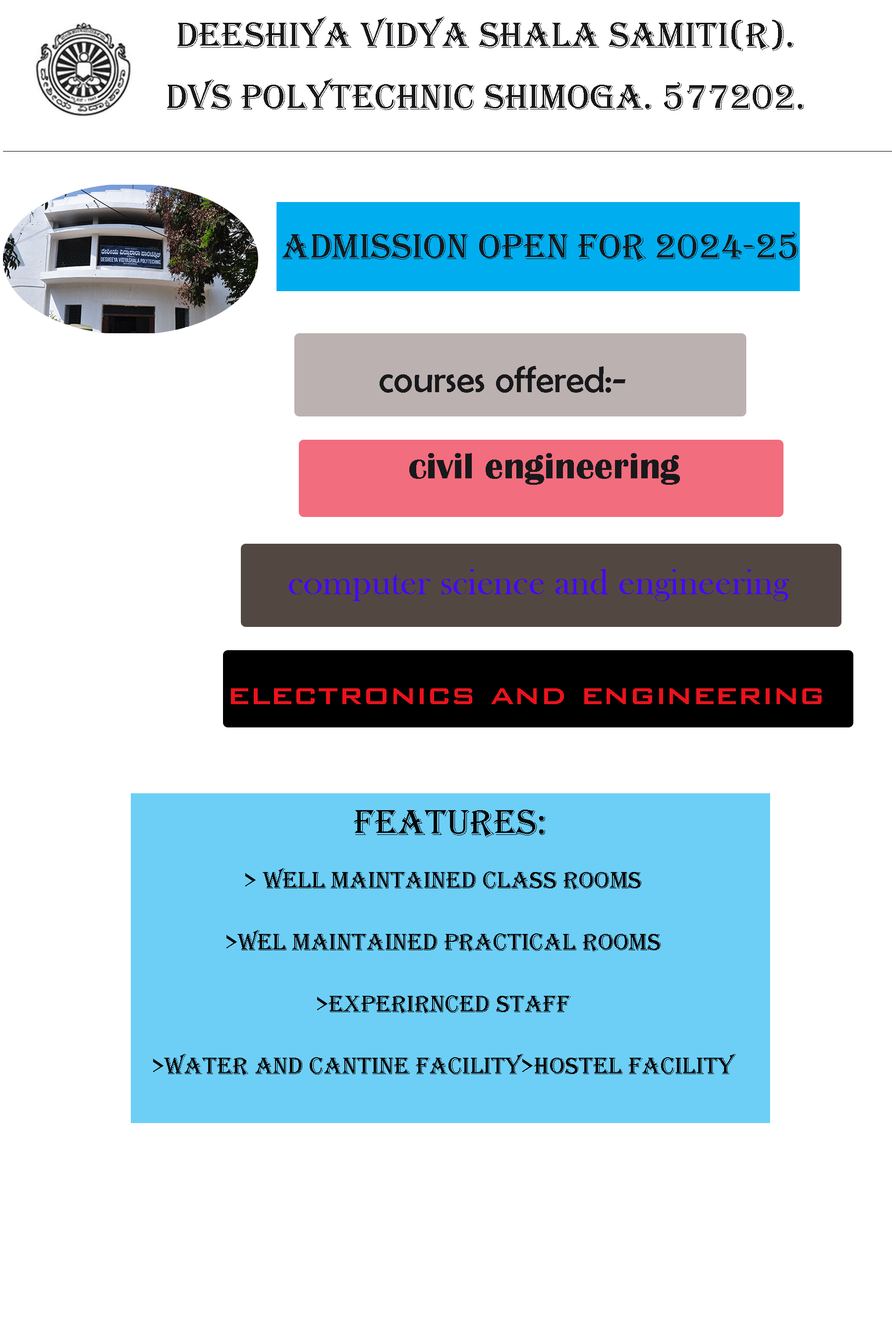
<style>
.page{position:relative;width:892px;height:1337px;background:#ffffff}
.page>*{position:absolute;margin:0}
.t1{font:37.2px/61.9px "Algerian";color:#19181b}
.t2{font:37.2px "Algerian";color:#19181b}
.t3{font:37.2px "BerlinSansFB-Reg";color:#19181b}
.t4{font:37.2px "BritannicBold";color:#19181b}
.t5{font:37.2px "BaskOldFace";color:#4608f7}
.t6{font:37.2px "BankGothicBT-Medium";color:#eb121c}
.t7{font:37.2px "Algerian";color:#080809}
.t8{font:24.8px/61.9px "Algerian";color:#080809}
</style>
<div class="page">
<p class="t1" style="left:167px;top:16px;width:636px;height:94px;text-align:center">deeshiya vidya shala samiti(r).<br>dvs polytechnic shimoga. 577202.</p>
<p class="t2" style="left:282px;top:232px;width:515px;height:30px">admission open for 2024-25</p>
<p class="t3" style="left:379px;top:366px;width:246px;height:27px">courses offered:-</p>
<p class="t4" style="left:409px;top:453px;width:271px;height:32px">civil engineering</p>
<p class="t5" style="left:289px;top:569px;width:500px;height:32px">computer science and engineering</p>
<p class="t6" style="left:231px;top:689px;width:590px;height:15px">electronics and engineering</p>
<p class="t7" style="left:354px;top:810px;width:191px;height:28px">features:</p>
<p class="t8" style="left:153px;top:868px;width:583px;height:208px;text-align:center">&gt; Well maintained class rooms<br>&gt;wel maintained practical rooms<br>&gt;experirnced staff<br>&gt;water and cantine facility&gt;hostel facility</p>
</div>
